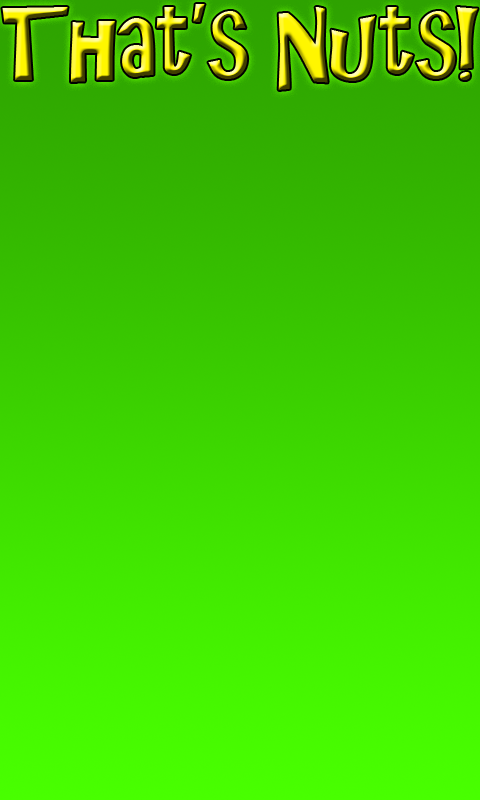
<style>
.page{position:relative;width:480px;height:800px}
.page>*{position:absolute;margin:0}
.t1{font:92px "ARCHRISTY"}
</style>
<div class="page">
<p class="t1" style="left:2px;top:4px;width:476px;height:86px">That’s Nuts!</p>
</div>
